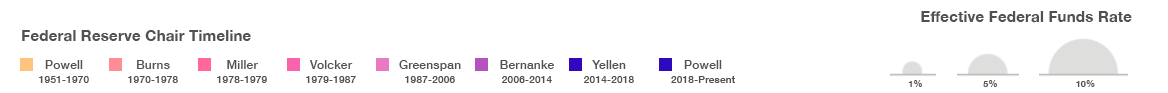
<style>
.page{position:relative;width:1168px;height:93px;background:#ffffff}
.page>*{position:absolute;margin:0}
.t1{font:14.9px "HelveticaNeue-Bold";letter-spacing:0.01em;color:#505151}
.t2{font:10.1px/13.8px "HelveticaNeue-Medium";letter-spacing:0.01em;color:#505151}
.t3{font:12px/13.8px "HelveticaNeue-Medium";letter-spacing:0.01em;color:#505151}
.t4{font:9px "HelveticaNeue-Bold";letter-spacing:0.01em;color:#505151}
</style>
<div class="page">
<p class="t1" style="left:921px;top:11px;width:211px;height:12px">Effective Federal Funds Rate</p>
<p class="t1" style="left:22px;top:30px;width:229px;height:12px">Federal Reserve Chair Timeline</p>
<p class="t2" style="left:39px;top:60px;width:50px;height:23px;text-align:center"><span class="t3">Powell<br></span>1951-1970</p>
<p class="t2" style="left:128px;top:60px;width:50px;height:23px;text-align:center"><span class="t3">Burns<br></span>1970-1978</p>
<p class="t2" style="left:217px;top:60px;width:50px;height:23px;text-align:center"><span class="t3">Miller<br></span>1978-1979</p>
<p class="t2" style="left:306px;top:60px;width:50px;height:23px;text-align:center"><span class="t3">Volcker<br></span>1979-1987</p>
<p class="t3" style="left:399px;top:60px;width:62px;height:23px;text-align:center">Greenspan<br><span class="t2">1987-2006</span></p>
<p class="t2" style="left:500px;top:60px;width:54px;height:23px;text-align:center"><span class="t3">Bernanke<br></span>2006-2014</p>
<p class="t2" style="left:584px;top:60px;width:50px;height:23px;text-align:center"><span class="t3">Yellen<br></span>2014-2018</p>
<p class="t2" style="left:671px;top:60px;width:64px;height:23px;text-align:center"><span class="t3">Powell<br></span>2018-Present</p>
<p class="t4" style="left:908px;top:80px;width:14px;height:7px">1%</p>
<p class="t4" style="left:983px;top:80px;width:14px;height:7px">5%</p>
<p class="t4" style="left:1076px;top:80px;width:19px;height:7px">10%</p>
</div>
